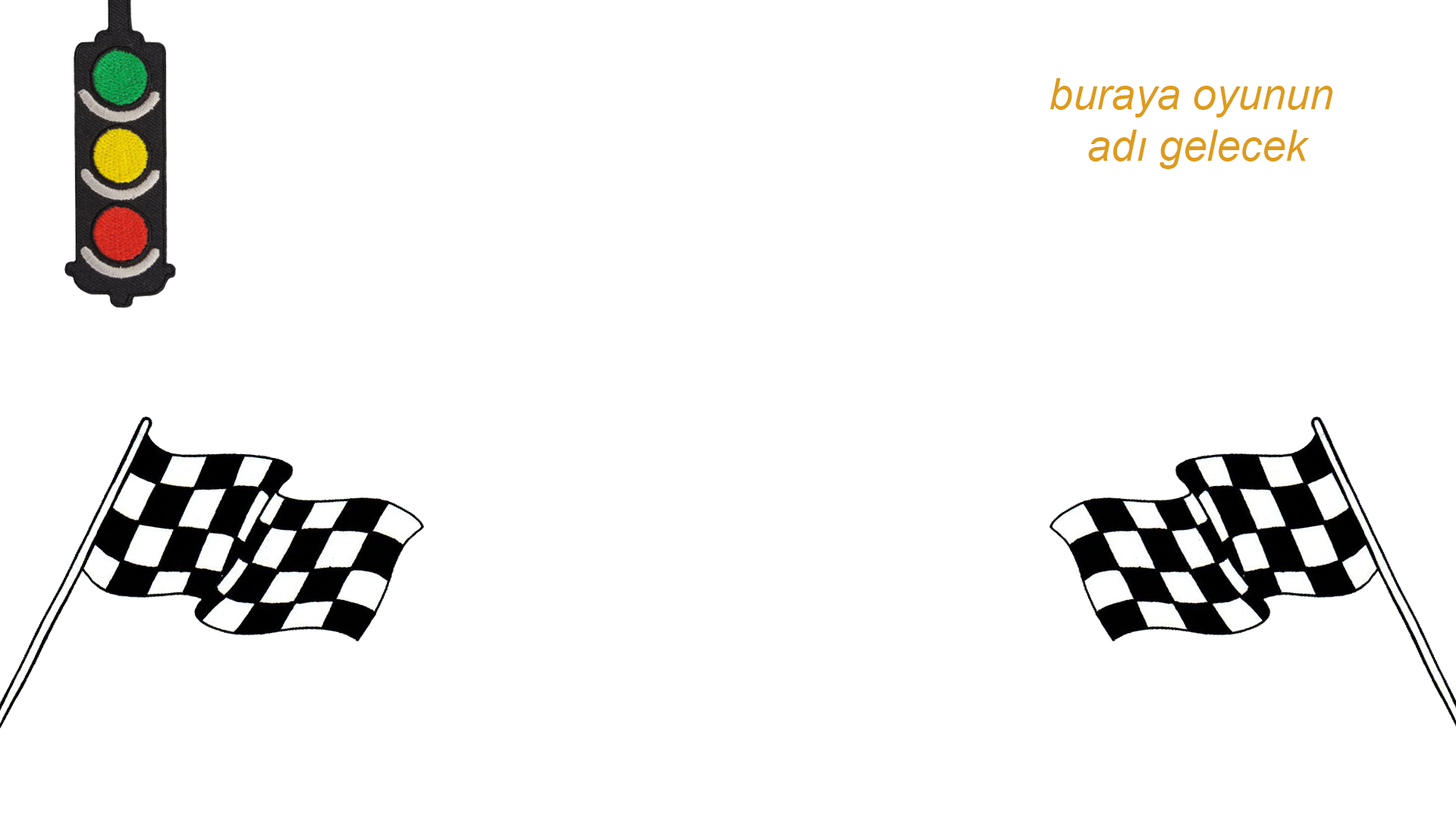
<style>
.page{position:relative;width:1456px;height:819px;background:#ffffff}
.page>*{position:absolute;margin:0}
.t1{font:43px "Arial-ItalicMT";color:#dd9b1d}
</style>
<div class="page">
<p class="t1" style="left:1050px;top:78px;width:283px;height:91px;text-align:center">buraya oyunun <br>adı gelecek</p>
</div>
